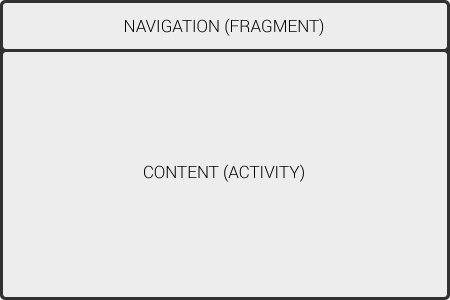
<style>
.page{position:relative;width:450px;height:300px;background:#ededed}
.page>*{position:absolute;margin:0}
.t1{font:17px "Roboto-Light";color:#000000;text-transform:uppercase}
</style>
<div class="page">
<p class="t1" style="left:125px;top:18px;width:199px;height:18px">Navigation (fragment)</p>
<p class="t1" style="left:144px;top:164px;width:160px;height:18px">Content (Activity)</p>
</div>
